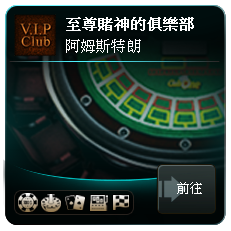
<style>
.page{position:relative;width:231px;height:231px}
.page>*{position:absolute;margin:0}
.t1{font:15px "PMingLiU";letter-spacing:0.01em;color:#fefefe;font-weight:bold}
.t2{font:15px "PMingLiU";letter-spacing:0.01em;color:#fefefe}
.t3{font:13px "PMingLiU";letter-spacing:0.01em;color:#ffffff}
</style>
<div class="page">
<p class="t1" style="left:66px;top:17px;width:128px;height:14px">至尊賭神的俱樂部</p>
<p class="t2" style="left:66px;top:39px;width:75px;height:14px">阿姆斯特朗</p>
<p class="t3" style="left:177px;top:182px;width:25px;height:12px">前往</p>
</div>
